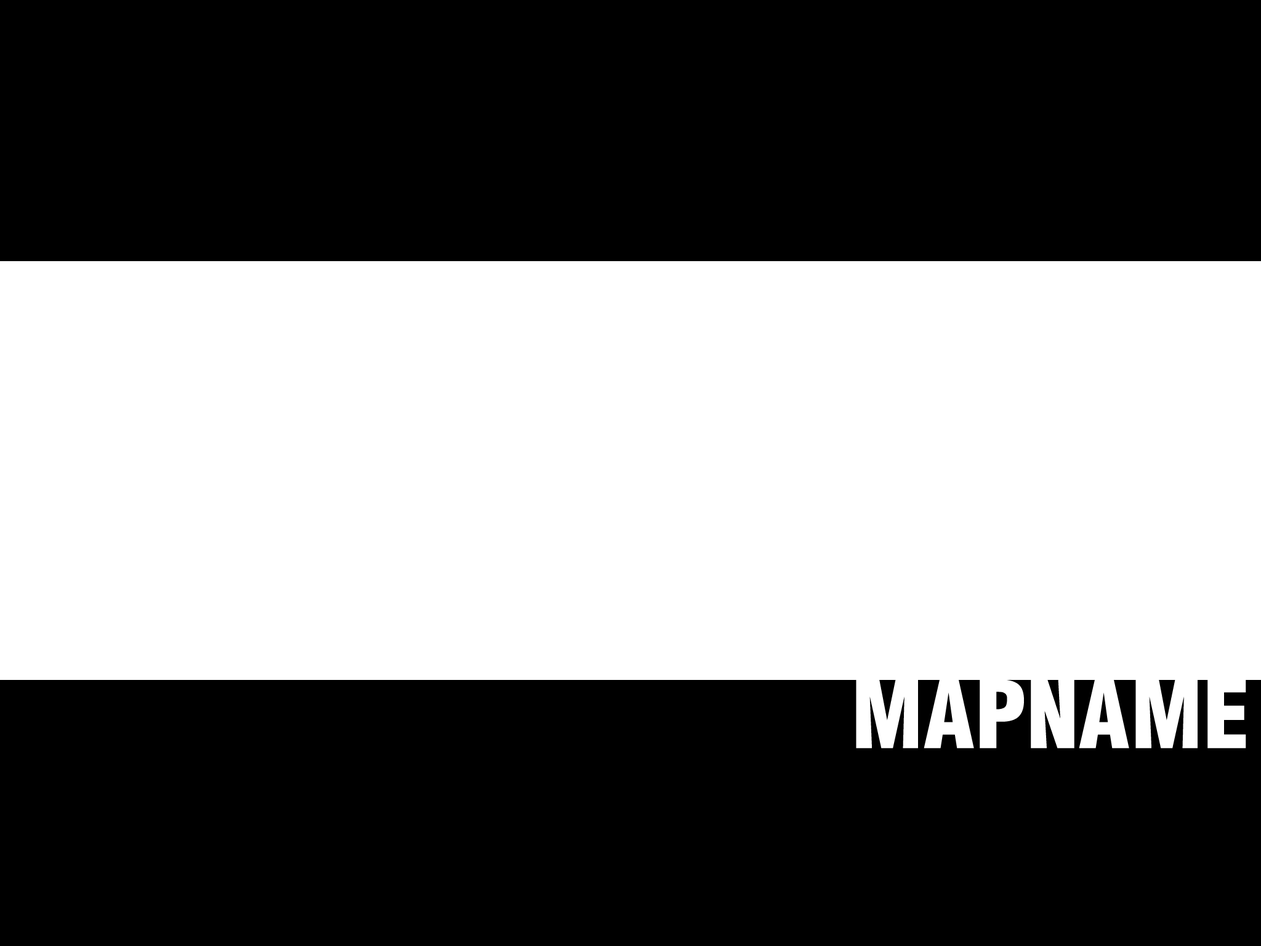
<style>
.page{position:relative;width:1261px;height:946px;background:#000000}
.page>*{position:absolute;margin:0}
.t1{font:102.6px "HelveticaCondensedBlackSemiBold";color:#ffffff}
</style>
<div class="page">
<p class="t1" style="left:856px;top:679px;width:390px;height:69px">MAPNAME</p>
</div>
